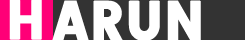
<style>
.page{position:relative;width:245px;height:40px;background:#ffffff}
.page>*{position:absolute;margin:0}
.t1{font:55.1px "Poppins";letter-spacing:0.33em;color:#ffffff;text-transform:uppercase;font-weight:bold;scale:0.89 1}
.t2{font:55.1px "Poppins";letter-spacing:0.03em;color:#ffffff;text-transform:uppercase;font-weight:bold;scale:0.89 1}
</style>
<div class="page">
<p class="t1" style="left:9px;top:0px;width:33px;height:40px">H</p>
<p class="t2" style="left:52px;top:0px;width:149px;height:41px">ARUN</p>
</div>
